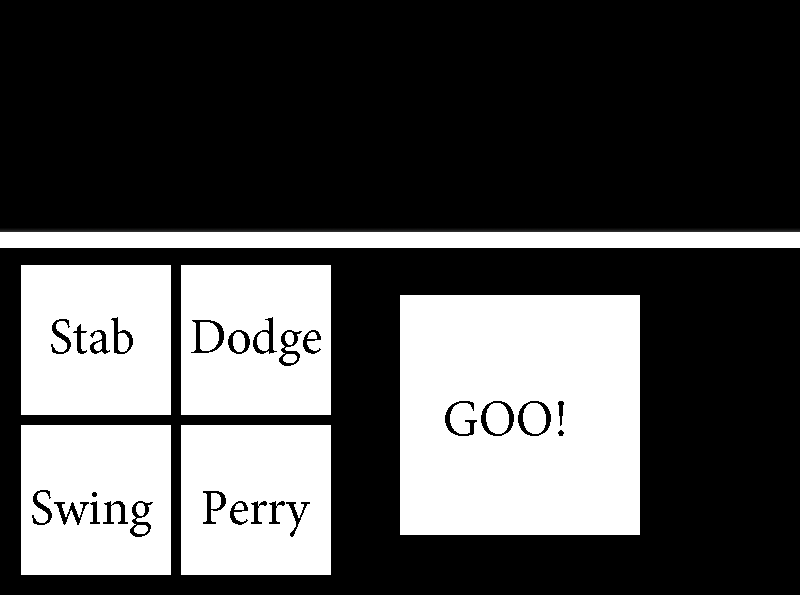
<style>
.page{position:relative;width:800px;height:595px;background:#000000}
.page>*{position:absolute;margin:0}
.t1{font:50px "MinionPro-Regular";color:#000000}
</style>
<div class="page">
<p class="t1" style="left:51px;top:317px;width:82px;height:37px">Stab</p>
<p class="t1" style="left:191px;top:317px;width:130px;height:49px">Dodge</p>
<p class="t1" style="left:445px;top:401px;width:119px;height:35px">GOO!</p>
<p class="t1" style="left:32px;top:490px;width:121px;height:47px">Swing</p>
<p class="t1" style="left:203px;top:491px;width:107px;height:46px">Perry</p>
</div>
